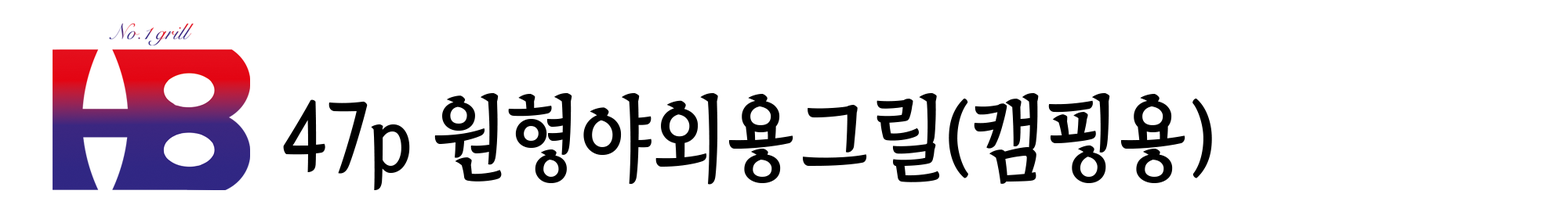
<style>
.page{position:relative;width:1568px;height:205px;background:#ffffff}
.page>*{position:absolute;margin:0}
.t1{font:93.7px "TheIndependenceHallofKorea-Regular";color:#000000;scale:0.89 1}
</style>
<div class="page">
<p class="t1" style="left:283px;top:93px;width:929px;height:98px">47p 원형야외용그릴(캠핑용)</p>
</div>
